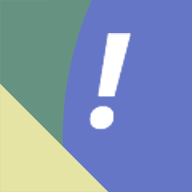
<style>
.page{position:relative;width:192px;height:192px;background:#6676c6}
.page>*{position:absolute;margin:0}
.t1{font:130px "OpenSans-BoldItalic";color:#ffffff}
</style>
<div class="page">
<p class="t1" style="left:89px;top:33px;width:42px;height:97px">!</p>
</div>
